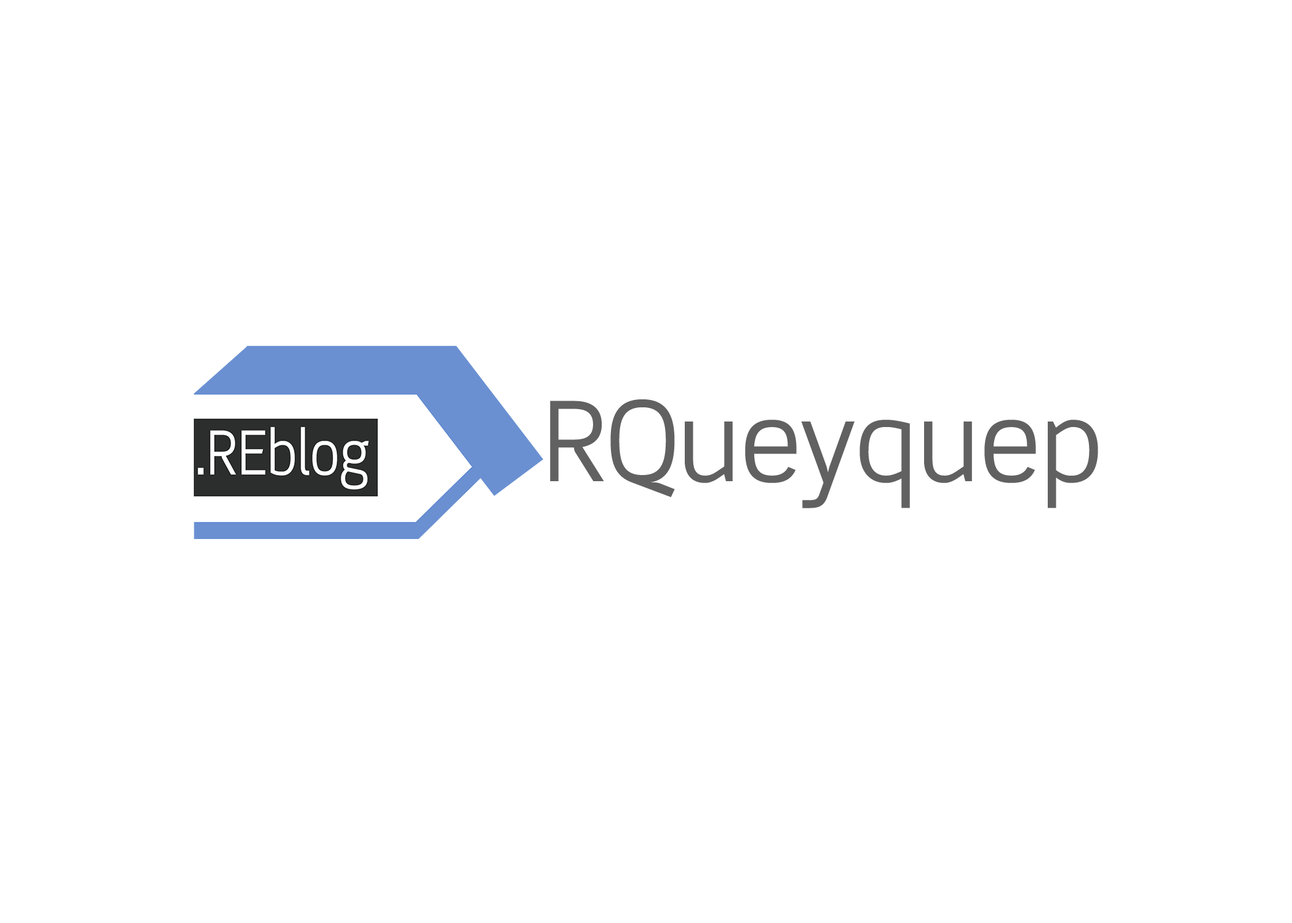
<style>
.page{position:relative;width:1292px;height:923px;background:#ffffff}
.page>*{position:absolute;margin:0}
.t1{font:111.1px "SceneStd-Regular";color:#616161;scale:0.96 1}
</style>
<div class="page">
<p class="t1" style="left:550px;top:399px;width:548px;height:109px">RQueyquep</p>
</div>
